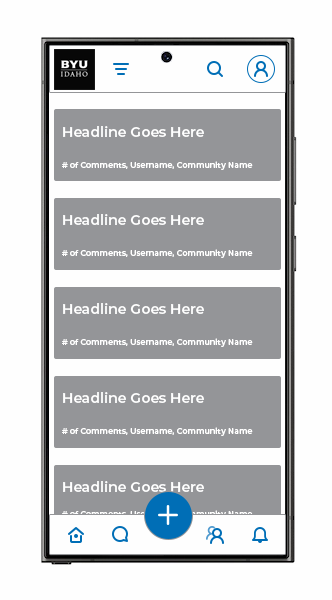
<style>
.page{position:relative;width:332px;height:600px;background:#fefefe}
.page>*{position:absolute;margin:0}
.t1{font:14px "Montserrat-SemiBold";color:#ffffff}
.t2{font:8px "Montserrat-SemiBold";color:#ffffff}
</style>
<div class="page">
<p class="t1" style="left:63px;top:126px;width:141px;height:11px">Headline Goes Here</p>
<p class="t2" style="left:62px;top:161px;width:191px;height:9px"># of Comments, Username, Community Name</p>
<p class="t1" style="left:63px;top:214px;width:141px;height:11px">Headline Goes Here</p>
<p class="t2" style="left:62px;top:249px;width:191px;height:9px"># of Comments, Username, Community Name</p>
<p class="t1" style="left:63px;top:303px;width:141px;height:11px">Headline Goes Here</p>
<p class="t2" style="left:62px;top:338px;width:191px;height:9px"># of Comments, Username, Community Name</p>
<p class="t1" style="left:63px;top:392px;width:141px;height:11px">Headline Goes Here</p>
<p class="t2" style="left:62px;top:427px;width:191px;height:9px"># of Comments, Username, Community Name</p>
<p class="t1" style="left:63px;top:481px;width:141px;height:11px">Headline Goes Here</p>
</div>
